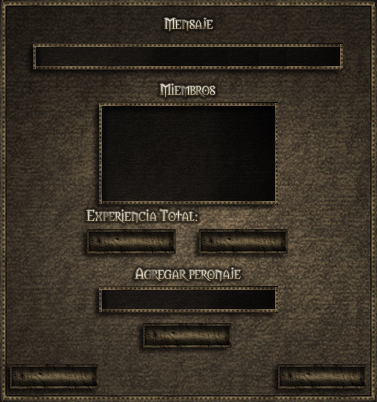
<style>
.page{position:relative;width:377px;height:402px}
.page>*{position:absolute;margin:0}
.t1{font:14px "Morpheus";color:#dbd6c2}
.t2{font:14px "Morpheus"}
.t3{font:14px "Morpheus";color:#c0bba8}
</style>
<div class="page">
<p class="t1" style="left:164px;top:18px;width:49px;height:14px">Mensaje</p>
<p class="t2" style="left:159px;top:83px;width:56px;height:15px">Miembros</p>
<p class="t2" style="left:86px;top:209px;width:111px;height:14px">Experiencia Total:</p>
<p class="t3" style="left:134px;top:268px;width:107px;height:13px">Agregar peronaje</p>
</div>
